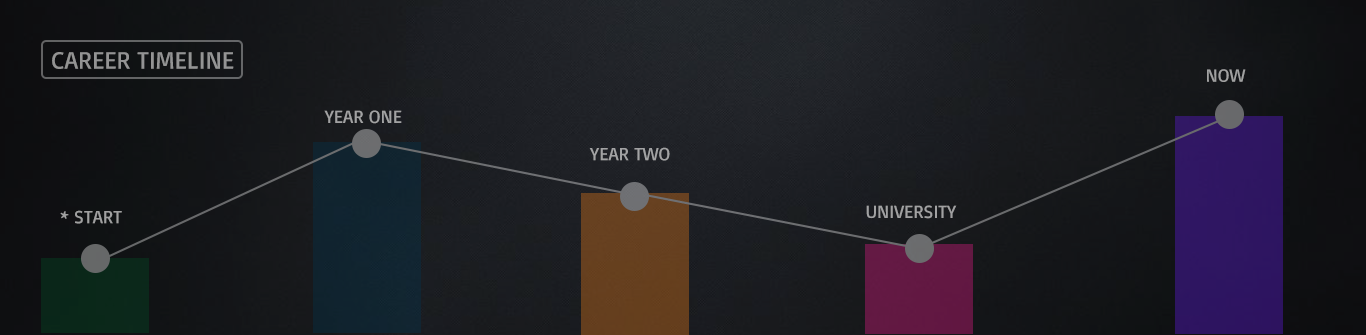
<style>
.page{position:relative;width:1366px;height:335px}
.page>*{position:absolute;margin:0}
.t1{font:24.8px "Basic-Regular";color:#939394;text-transform:uppercase}
.t2{font:18.6px "Basic-Regular";color:#a1a1a1;text-transform:uppercase}
.t3{font:18.6px "Basic-Regular";color:#a1a1a2;text-transform:uppercase}
.t4{font:18.6px "Basic-Regular";color:#a3a3a4;text-transform:uppercase}
.t5{font:18.6px "Basic-Regular";color:#9fa0a0;text-transform:uppercase}
</style>
<div class="page">
<p class="t1" style="left:52px;top:52px;width:182px;height:17px">career timeline</p>
<p class="t2" style="left:1207px;top:69px;width:39px;height:13px">now</p>
<p class="t3" style="left:324px;top:110px;width:78px;height:14px">year one</p>
<p class="t4" style="left:589px;top:147px;width:81px;height:14px">year two</p>
<p class="t3" style="left:866px;top:205px;width:91px;height:14px">university</p>
<p class="t5" style="left:60px;top:210px;width:62px;height:14px">* start</p>
</div>
